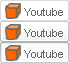
<style>
.page{position:relative;width:69px;height:63px;background:#ffffff}
.page>*{position:absolute;margin:0}
.t1{font:11px "ArialMT";color:#666666}
</style>
<div class="page">
<p class="t1" style="left:24px;top:8px;width:39px;height:8px">Youtube</p>
<p class="t1" style="left:24px;top:29px;width:39px;height:8px">Youtube</p>
<p class="t1" style="left:24px;top:50px;width:39px;height:8px">Youtube</p>
</div>
